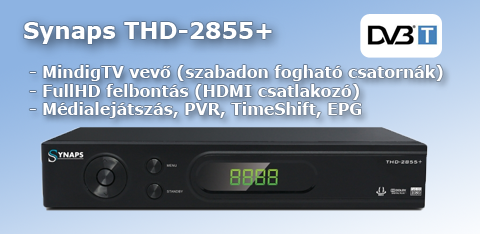
<style>
.page{position:relative;width:480px;height:234px}
.page>*{position:absolute;margin:0}
.t1{font:23px "Verdana-Bold";color:#ffffff}
.t2{font:15.8px "Verdana-Bold";color:#ffffff}
</style>
<div class="page">
<p class="t1" style="left:24px;top:22px;width:248px;height:22px">Synaps THD-2855+</p>
<p class="t2" style="left:29px;top:65px;width:414px;height:53px">- MindigTV vevő (szabadon fogható csatornák)<br>- FullHD felbontás (HDMI csatlakozó)<br>- Médialejátszás, PVR, TimeShift, EPG</p>
</div>
